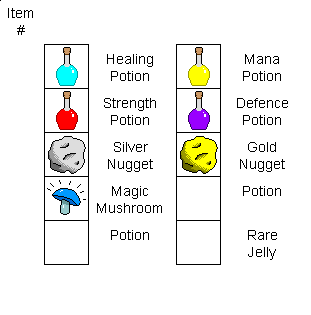
<style>
.page{position:relative;width:311px;height:315px;background:#ffffff}
.page>*{position:absolute;margin:0}
.t1{font:14px "ArialMT";color:#000000}
</style>
<div class="page">
<p class="t1" style="left:8px;top:8px;width:25px;height:27px;text-align:center">Item<br>#</p>
<p class="t1" style="left:107px;top:54px;width:46px;height:27px;text-align:center">Healing<br>Potion</p>
<p class="t1" style="left:243px;top:54px;width:38px;height:27px;text-align:center">Mana<br>Potion</p>
<p class="t1" style="left:104px;top:98px;width:52px;height:27px;text-align:center">Strength<br>Potion</p>
<p class="t1" style="left:237px;top:98px;width:51px;height:27px;text-align:center">Defence<br>Potion</p>
<p class="t1" style="left:108px;top:142px;width:45px;height:30px;text-align:center">Silver<br>Nugget</p>
<p class="t1" style="left:240px;top:142px;width:45px;height:30px;text-align:center">Gold<br>Nugget</p>
<p class="t1" style="left:97px;top:186px;width:65px;height:27px;text-align:center">Magic<br>Mushroom</p>
<p class="t1" style="left:243px;top:186px;width:38px;height:10px">Potion</p>
<p class="t1" style="left:111px;top:230px;width:38px;height:10px">Potion</p>
<p class="t1" style="left:248px;top:230px;width:29px;height:30px;text-align:center">Rare<br>Jelly</p>
</div>
